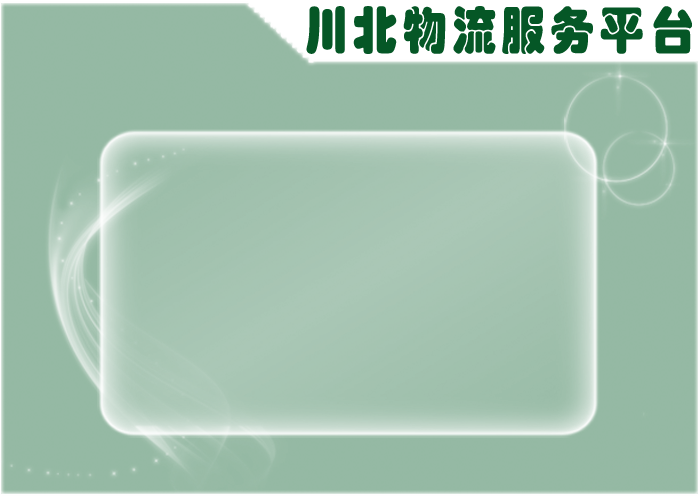
<style>
.page{position:relative;width:700px;height:500px;background:#95b9a4}
.page>*{position:absolute;margin:0}
.t1{font:50.9px "STHupo";letter-spacing:0.1em;color:#055726;scale:0.88 1}
</style>
<div class="page">
<p class="t1" style="left:306px;top:6px;width:386px;height:48px">川北物流服务平台</p>
</div>
